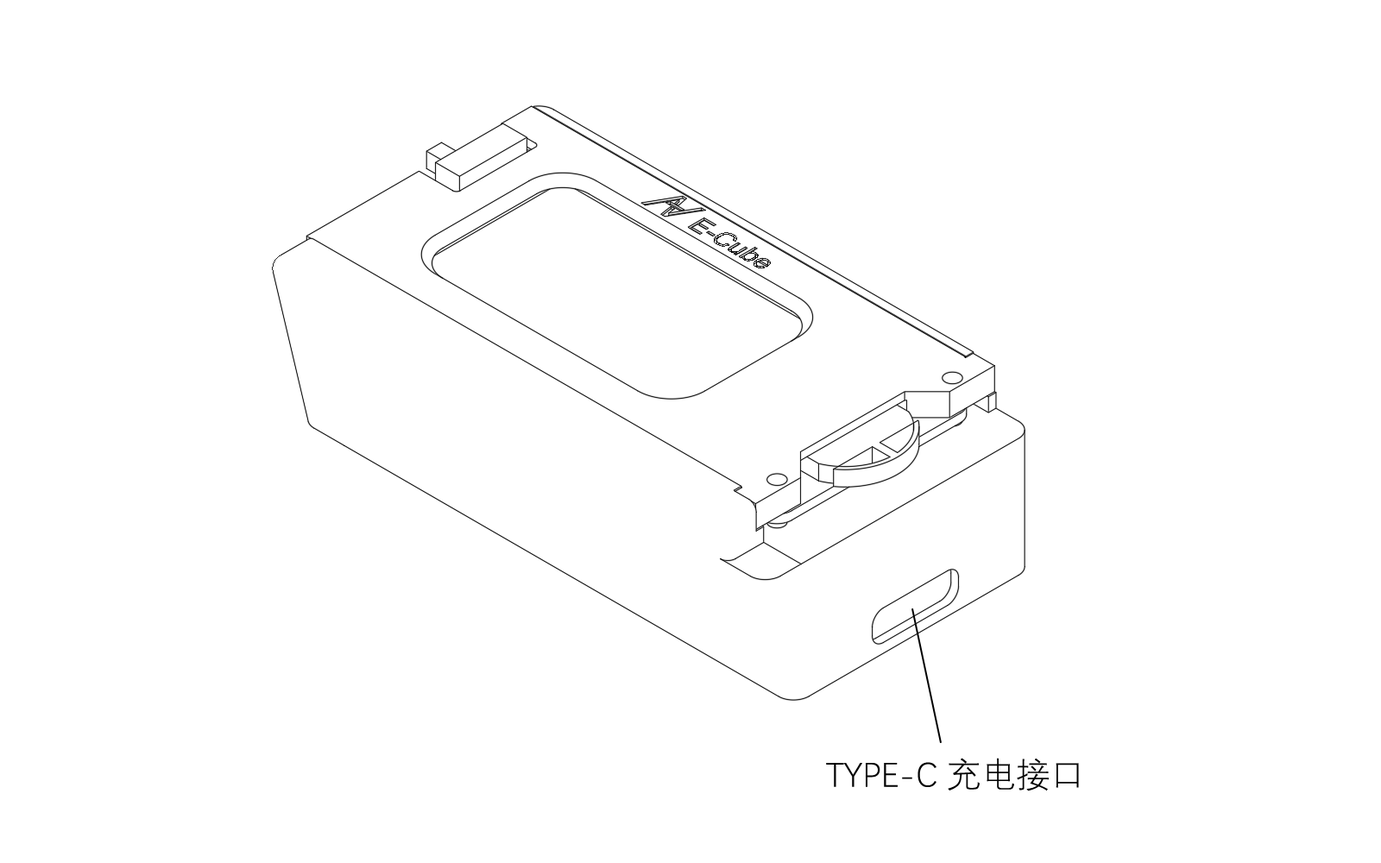
<style>
.page{position:relative;width:1381px;height:863px;background:#ffffff}
.page>*{position:absolute;margin:0}
.t1{font:34.5px "DengXian-Light";color:#000000}
</style>
<div class="page">
<p class="t1" style="left:826px;top:758px;width:253px;height:34px">TYPE-C 充电接口</p>
</div>
